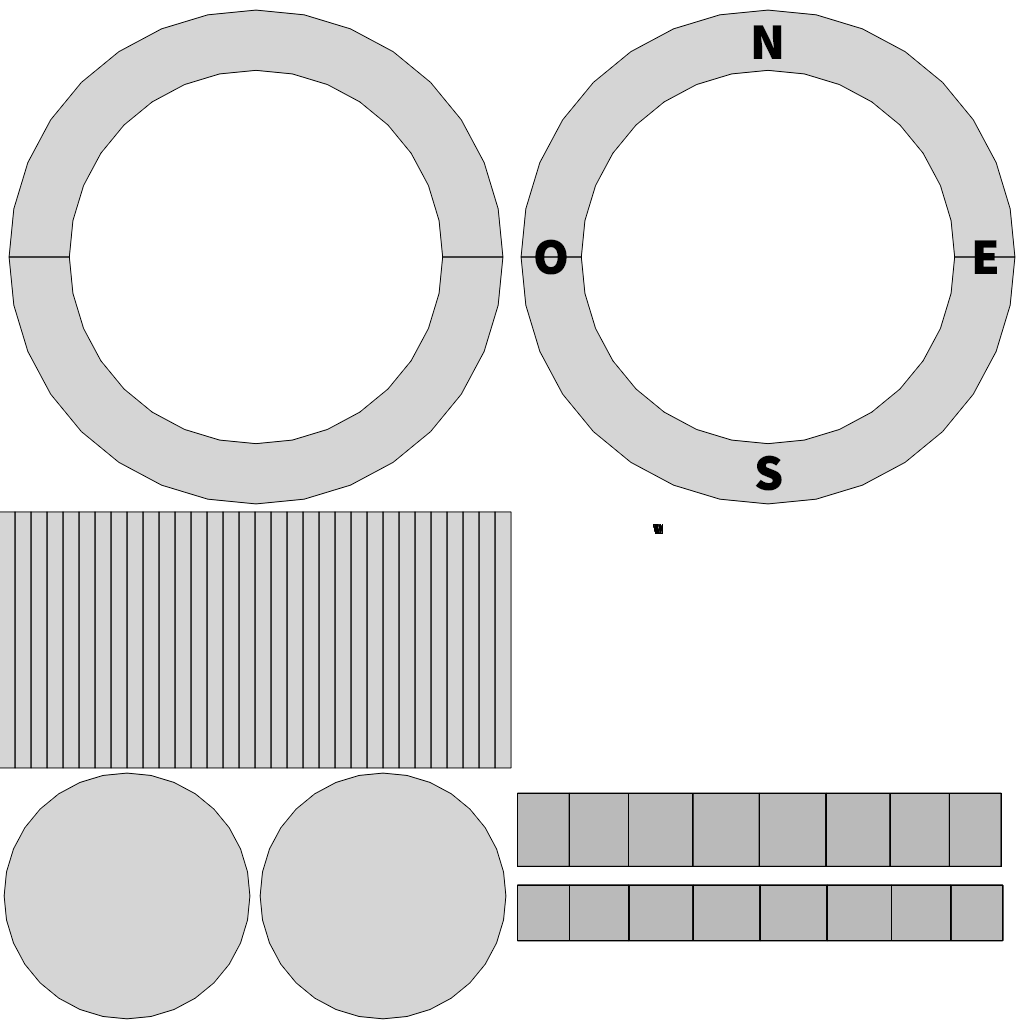
<style>
.page{position:relative;width:1024px;height:1024px;background:#ffffff}
.page>*{position:absolute;margin:0}
.t1{font:52px "SourceSansPro-Black";letter-spacing:-0.06em;color:#000000}
</style>
<div class="page">
<p class="t1" style="left:753px;top:25px;width:29px;height:34px">N</p>
<p class="t1" style="left:535px;top:239px;width:32px;height:36px">O</p>
<p class="t1" style="left:974px;top:240px;width:23px;height:34px">E</p>
<p class="t1" style="left:755px;top:455px;width:27px;height:36px">S</p>
</div>
